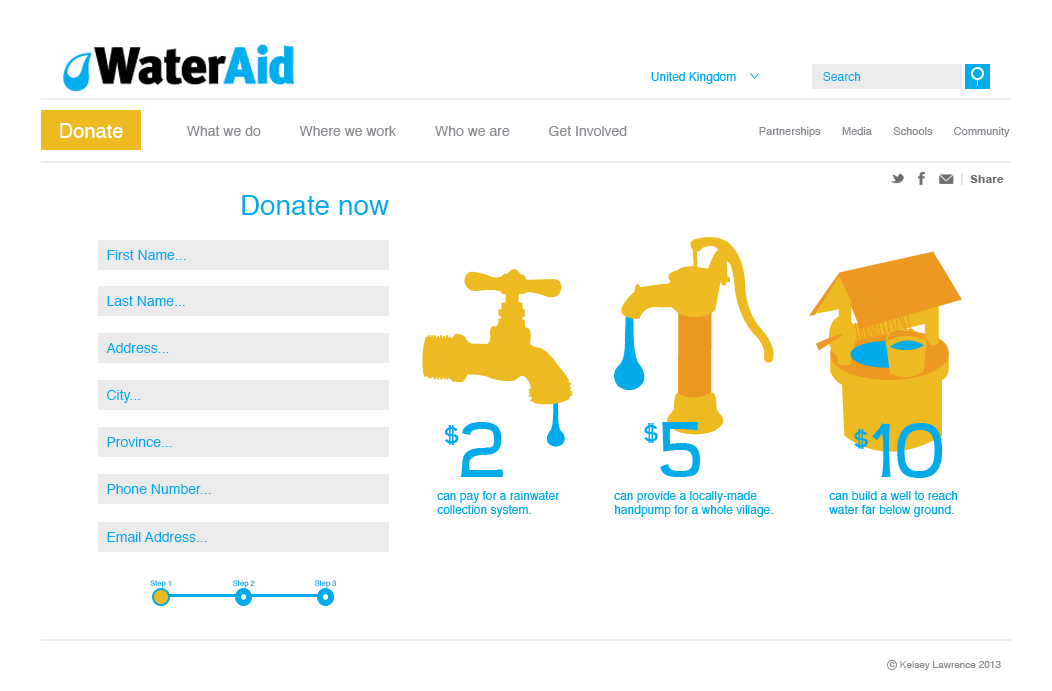
<style>
.page{position:relative;width:1052px;height:691px;background:#ffffff}
.page>*{position:absolute;margin:0}
.t1{font:12px "Helvetica";color:#00adee}
.t2{font:20px "Helvetica";color:#ffffff}
.t3{font:14px "Helvetica";color:#8e8a91}
.t4{font:18px "Helvetica";color:#696369}
.t5{font:11px "Helvetica";color:#8e8991}
.t6{font:28px "Helvetica";color:#01abe9}
.t7{font:14px "Helvetica";color:#01abe9}
.t8{font:7.6px "Helvetica"}
.t9{font:10px "Helvetica";color:#8e8a91}
</style>
<div class="page">
<p class="t1" style="left:651px;top:72px;width:85px;height:12px">United Kingdom</p>
<p class="t1" style="left:823px;top:72px;width:38px;height:9px">Search</p>
<p class="t2" style="left:60px;top:123px;width:63px;height:15px">Donate</p>
<p class="t3" style="left:187px;top:126px;width:440px;height:10px"><span class="t4">     </span>What we do          Where we work          Who we are          Get Involved</p>
<p class="t5" style="left:759px;top:127px;width:251px;height:10px">Partnerships       Media       Schools       Community</p>
<p class="t6" style="left:242px;top:195px;width:147px;height:20px">Donate now</p>
<p class="t7" style="left:107px;top:250px;width:79px;height:10px">First Name...</p>
<p class="t7" style="left:107px;top:296px;width:78px;height:10px">Last Name...</p>
<p class="t7" style="left:106px;top:343px;width:63px;height:10px">Address...</p>
<p class="t7" style="left:107px;top:390px;width:33px;height:13px">City...</p>
<p class="t7" style="left:107px;top:437px;width:65px;height:10px">Province...</p>
<p class="t7" style="left:107px;top:484px;width:104px;height:10px">Phone Number...</p>
<p class="t7" style="left:107px;top:532px;width:100px;height:10px">Email Address...</p>
<p class="t8" style="left:150px;top:580px;width:21px;height:8px">Step 1</p>
<p class="t8" style="left:232px;top:580px;width:23px;height:8px">Step 2</p>
<p class="t8" style="left:314px;top:580px;width:23px;height:8px">Step 3</p>
<p class="t9" style="left:889px;top:662px;width:6px;height:5px">c</p>
<p class="t9" style="left:900px;top:661px;width:101px;height:9px">Kelsey Lawrence 2013</p>
</div>
